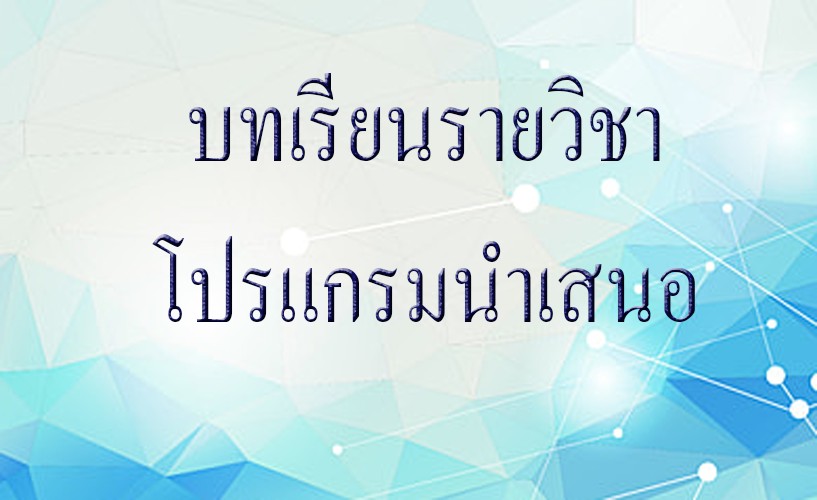
<style>
.page{position:relative;width:817px;height:500px}
.page>*{position:absolute;margin:0}
.t1{font:134.4px "AngsanaNew";scale:0.84 1}
</style>
<div class="page">
<p class="t1" style="left:152px;top:73px;width:543px;height:249px;text-align:center">บทเรียนรายวิชา<br>โปรแกรมนำเสนอ</p>
</div>
